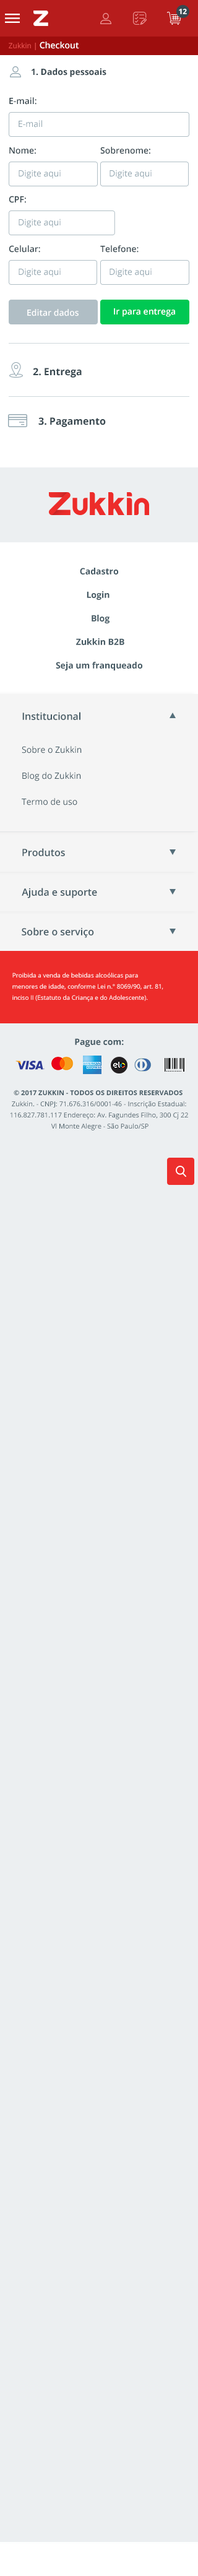
<style>
.page{position:relative;width:198px;height:2576px;background:#eceff1}
.page>*{position:absolute;margin:0}
.t1{font:7.4px "OpenSans-Bold";color:#ffffff;text-transform:uppercase}
.t2{font:7.4px "OpenSans";color:#ef5350}
.t3{font:8.7px "OpenSans-Semibold";color:#ffffff}
.t4{font:8.7px "OpenSans-Bold";color:#37474f}
.t5{font:8.7px "OpenSans-Semibold";color:#37474f}
.t6{font:8.7px "OpenSans";color:#90a4ae}
.t7{font:9.9px "OpenSans-Bold";color:#37474f}
.t8{font:8.7px/23.5px "OpenSans-Bold";color:#455a64}
.t9{font:9.9px "OpenSans-Semibold";color:#455a64}
.t10{font:8.7px/26px "OpenSans";color:#455a64}
.t11{font:6.2px/11.1px "OpenSans";color:#ffffff}
.t12{font:8.7px "OpenSans-Bold";color:#455a64}
.t13{font:6.8px/11.1px "OpenSans";color:#455a64}
.t14{font:6.8px/11.1px "OpenSans-Bold";color:#455a64}
</style>
<div class="page">
<p class="t1" style="left:179px;top:9px;width:8px;height:5px">12</p>
<p class="t2" style="left:9px;top:41px;width:70px;height:9px">Zukkin | <span class="t3">Checkout</span></p>
<p class="t4" style="left:32px;top:68px;width:74px;height:9px">1. Dados pessoais</p>
<p class="t5" style="left:9px;top:97px;width:28px;height:8px">E-mail:</p>
<p class="t6" style="left:19px;top:120px;width:23px;height:8px">E-mail</p>
<p class="t5" style="left:9px;top:147px;width:27px;height:7px">Nome:</p>
<p class="t5" style="left:100px;top:147px;width:50px;height:7px">Sobrenome:</p>
<p class="t6" style="left:19px;top:170px;width:42px;height:9px">Digite aqui</p>
<p class="t6" style="left:110px;top:170px;width:42px;height:9px">Digite aqui</p>
<p class="t5" style="left:9px;top:196px;width:17px;height:7px">CPF:</p>
<p class="t6" style="left:19px;top:219px;width:42px;height:9px">Digite aqui</p>
<p class="t5" style="left:9px;top:245px;width:31px;height:8px">Celular:</p>
<p class="t5" style="left:100px;top:245px;width:39px;height:8px">Telefone:</p>
<p class="t6" style="left:19px;top:268px;width:42px;height:9px">Digite aqui</p>
<p class="t6" style="left:110px;top:268px;width:42px;height:9px">Digite aqui</p>
<p class="t3" style="left:27px;top:309px;width:52px;height:7px">Editar dados</p>
<p class="t3" style="left:114px;top:308px;width:61px;height:9px">Ir para entrega</p>
<p class="t7" style="left:33px;top:368px;width:49px;height:10px">2. Entrega</p>
<p class="t7" style="left:38px;top:417px;width:68px;height:10px">3. Pagamento</p>
<p class="t8" style="left:56px;top:568px;width:86px;height:102px;text-align:center">Cadastro<br>Login <br> Blog<br> Zukkin B2B<br>Seja um franqueado</p>
<p class="t9" style="left:22px;top:712px;width:58px;height:8px">Institucional</p>
<p class="t10" style="left:22px;top:746px;width:60px;height:59px">Sobre o Zukkin<br>Blog do Zukkin<br>Termo de uso</p>
<p class="t9" style="left:22px;top:848px;width:43px;height:8px">Produtos</p>
<p class="t9" style="left:22px;top:888px;width:75px;height:10px">Ajuda e suporte</p>
<p class="t9" style="left:22px;top:927px;width:72px;height:11px">Sobre o serviço</p>
<p class="t11" style="left:12px;top:973px;width:151px;height:29px">Proibida a venda de bebidas alcoólicas para<br>menores de idade, conforme Lei n.° 8069/90, art. 81,<br>inciso II (Estatuto da Criança e do Adolescente).</p>
<p class="t12" style="left:75px;top:1038px;width:49px;height:9px">Pague com:</p>
<p class="t13" style="left:10px;top:1090px;width:178px;height:40px;text-align:center"><span class="t14">© 2017 ZUKKIN - TODOS OS DIREITOS RESERVADOS <br></span>Zukkin. - CNPJ: 71.676.316/0001-46 - Inscrição Estadual:<br>116.827.781.117 Endereço: Av. Fagundes Filho, 300 Cj 22<br> Vl Monte Alegre - São Paulo/SP</p>
</div>
